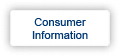
<style>
.page{position:relative;width:120px;height:56px;background:#ffffff}
.page>*{position:absolute;margin:0}
.t1{font:11px "ArialMT";letter-spacing:0.01em;color:#003974}
</style>
<div class="page">
<p class="t1" style="left:32px;top:18px;width:56px;height:21px;text-align:center">Consumer<br>Information</p>
</div>
